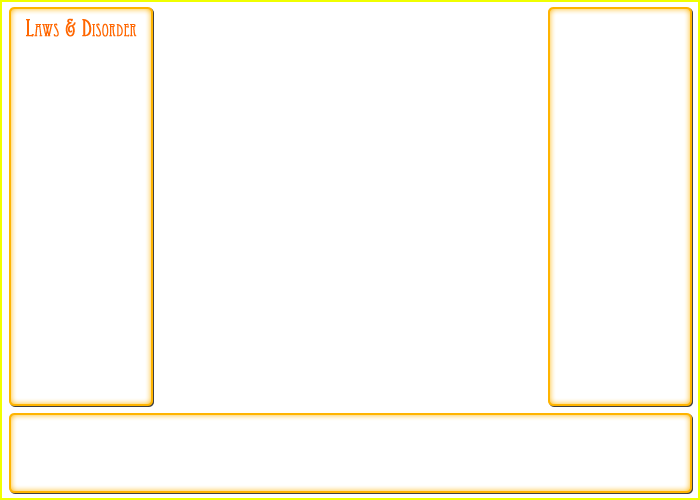
<style>
.page{position:relative;width:700px;height:500px;background:#ffffff}
.page>*{position:absolute;margin:0}
.t1{font:24px "EccentricStd";color:#ff6600;font-variant:small-caps;font-weight:bold}
</style>
<div class="page">
<p class="t1" style="left:26px;top:18px;width:111px;height:19px">Laws &amp; Disorder</p>
</div>
